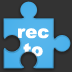
<style>
.page{position:relative;width:72px;height:72px;background:#333333}
.page>*{position:absolute;margin:0}
.t1{font:18px/18px "Arial-Black";color:#ffffff}
</style>
<div class="page">
<p class="t1" style="left:18px;top:28px;width:31px;height:29px;text-align:center">rec<br>to</p>
</div>
